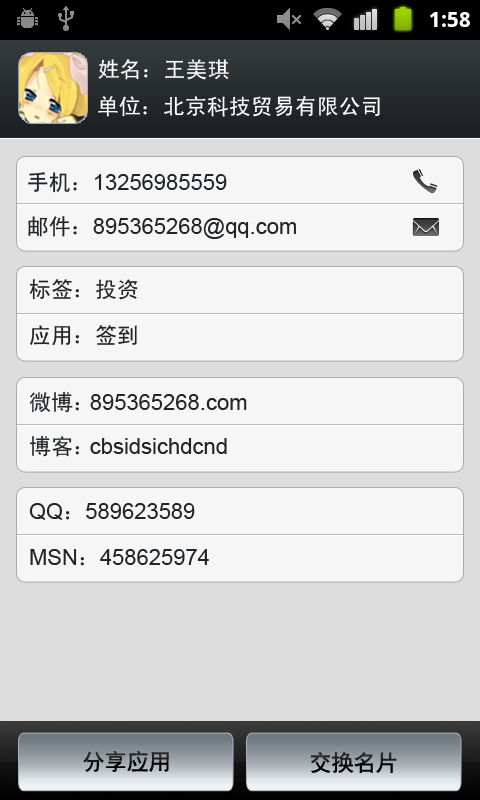
<style>
.page{position:relative;width:480px;height:800px;background:#f6f6f6}
.page>*{position:absolute;margin:0}
.t1{font:22px "SimHei";color:#ffffff}
.t2{font:22px "ArialMT";color:#212528}
.t3{font:22px "SimHei";color:#212528}
.t4{font:22px "CTCuHeiSJ"}
</style>
<div class="page">
<p class="t1" style="left:98px;top:59px;width:131px;height:21px">姓名：王美琪</p>
<p class="t1" style="left:98px;top:96px;width:282px;height:21px">单位：北京科技贸易有限公司</p>
<p class="t2" style="left:28px;top:172px;width:199px;height:21px"><span class="t3">手机：</span>13256985559</p>
<p class="t2" style="left:28px;top:216px;width:268px;height:23px"><span class="t3">邮件：</span>895365268@qq.com</p>
<p class="t3" style="left:29px;top:279px;width:109px;height:21px">标签：投资</p>
<p class="t3" style="left:30px;top:325px;width:107px;height:21px">应用：签到</p>
<p class="t3" style="left:29px;top:391px;width:50px;height:22px">微博：</p>
<p class="t2" style="left:90px;top:394px;width:157px;height:16px">895365268.com</p>
<p class="t3" style="left:29px;top:435px;width:50px;height:22px">博客：</p>
<p class="t2" style="left:90px;top:438px;width:137px;height:16px">cbsidsichdcnd</p>
<p class="t2" style="left:29px;top:503px;width:166px;height:17px">QQ<span class="t3">：</span>589623589</p>
<p class="t2" style="left:30px;top:549px;width:179px;height:17px">MSN<span class="t3">：</span>458625974</p>
<p class="t4" style="left:83px;top:751px;width:86px;height:21px">分享应用</p>
<p class="t4" style="left:311px;top:751px;width:86px;height:22px">交换名片</p>
</div>
